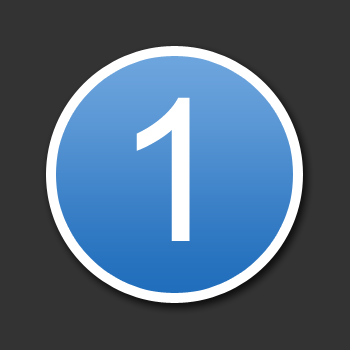
<style>
.page{position:relative;width:350px;height:350px;background:#333333}
.page>*{position:absolute;margin:0}
.t1{font:200px "ArialMT";color:#ffffff}
</style>
<div class="page">
<p class="t1" style="left:136px;top:97px;width:54px;height:144px">1</p>
</div>
